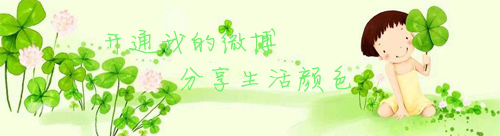
<style>
.page{position:relative;width:500px;height:136px;background:#f8ffde}
.page>*{position:absolute;margin:0}
.t1{font:30px "FZJLJW--GB1-0";color:#72ef6f}
</style>
<div class="page">
<p class="t1" style="left:105px;top:28px;width:171px;height:29px">开通我的微博</p>
<p class="t1" style="left:180px;top:65px;width:172px;height:28px">分享生活颜色</p>
</div>
